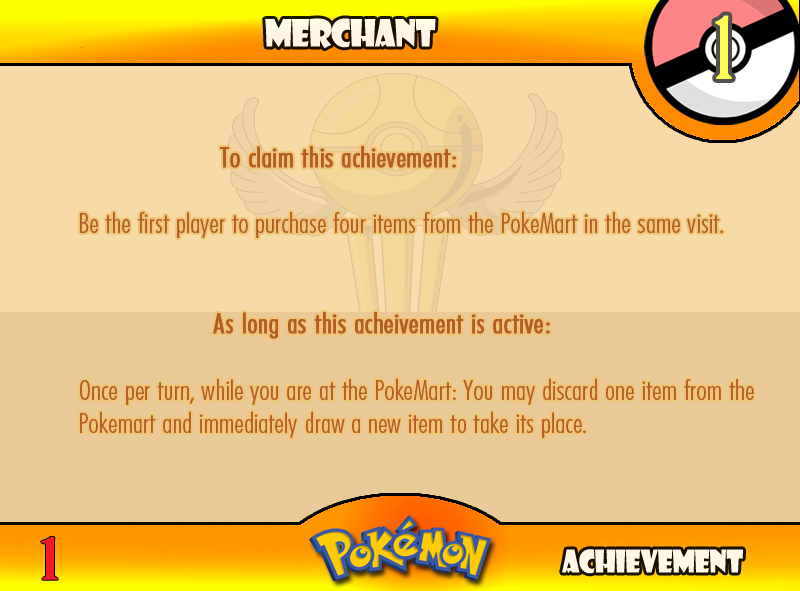
<style>
.page{position:relative;width:800px;height:591px;background:#e9c997}
.page>*{position:absolute;margin:0}
.t1{font:83.3px "BirchStd";letter-spacing:0.025em;color:#fffd59;font-weight:bold}
.t2{font:36.7px "ShowcardGothic-Reg";letter-spacing:-0.025em;color:#fff6e6;scale:0.91 1}
.t3{font:27.8px "FuturaCondensedBQ-Light";color:#b15c29;scale:1.08 1}
.t4{font:33.3px "FuturaCondensedBQ-Light";color:#b15c29;font-weight:bold;scale:1.08 1}
.t5{font:27.8px "FuturaCondensedBQ-Light";color:#b15c29;font-weight:bold;scale:1.08 1}
.t6{font:55.6px "BirchStd";color:#ed1c24;font-weight:bold;scale:1.5 1}
.t7{font:30.6px "ShowcardGothic-Reg";letter-spacing:-0.025em;color:#fff7e6;scale:0.91 1}
</style>
<div class="page">
<p class="t1" style="left:715px;top:15px;width:17px;height:64px">1</p>
<p class="t2" style="left:265px;top:18px;width:171px;height:31px">Merchant</p>
<p class="t3" style="left:80px;top:146px;width:674px;height:292px"><span class="t4">          <br>      </span><span class="t5">To claim this achievement:<br><br> </span>Be the first player to purchase four items from the PokeMart in the same visit.<br><br><br>     <span class="t5"> As long as this acheivement is active:<br></span><br> Once per turn, while you are at the PokeMart: You may discard one item from the   Pokemart and immediately draw a new item to take its place.</p>
<p class="t6" style="left:41px;top:537px;width:17px;height:43px">1</p>
<p class="t7" style="left:562px;top:549px;width:181px;height:25px">Achievement</p>
</div>
